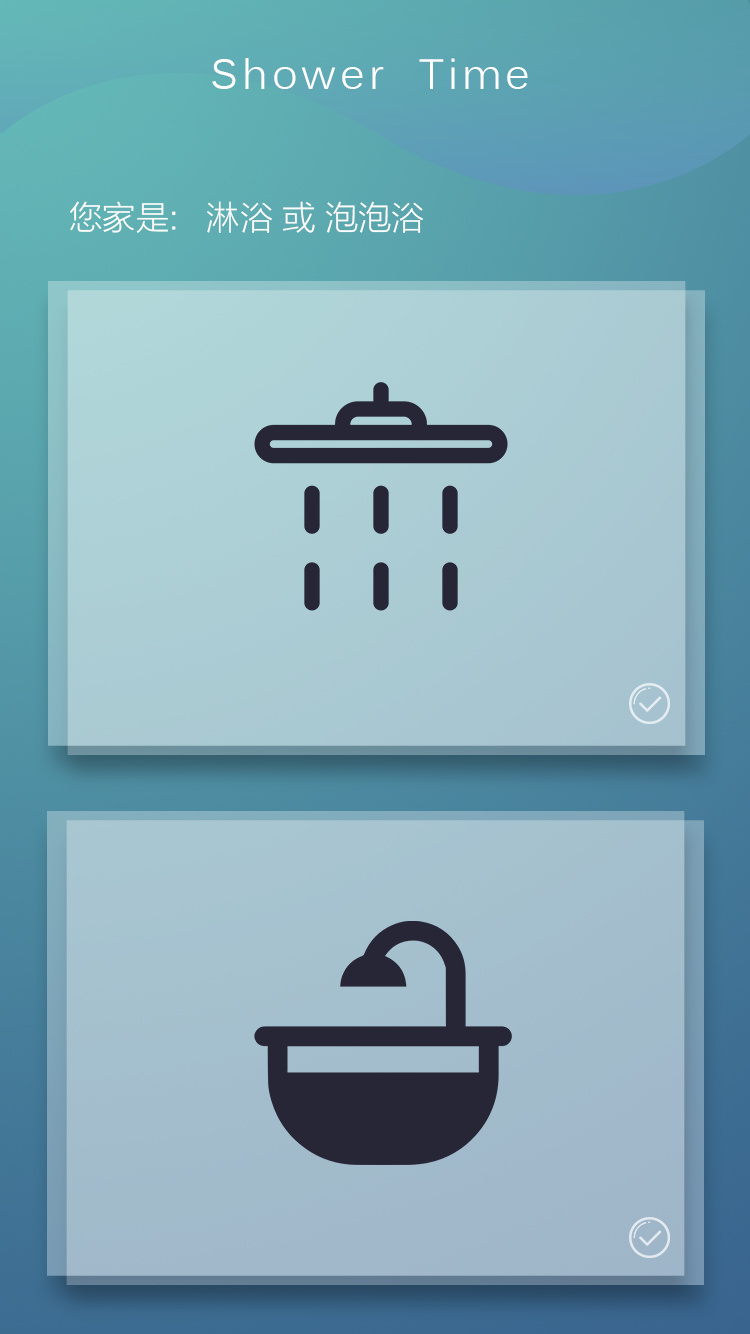
<style>
.page{position:relative;width:750px;height:1334px}
.page>*{position:absolute;margin:0}
.t1{font:41.7px "Kalinga";letter-spacing:0.1em;color:#ffffff}
.t2{font:33.3px "FZLTXHJW--GB1-0";color:#ffffff}
</style>
<div class="page">
<p class="t1" style="left:212px;top:58px;width:316px;height:31px">Shower  Time</p>
<p class="t2" style="left:70px;top:201px;width:353px;height:32px">您家是:   淋浴 或 泡泡浴</p>
</div>
